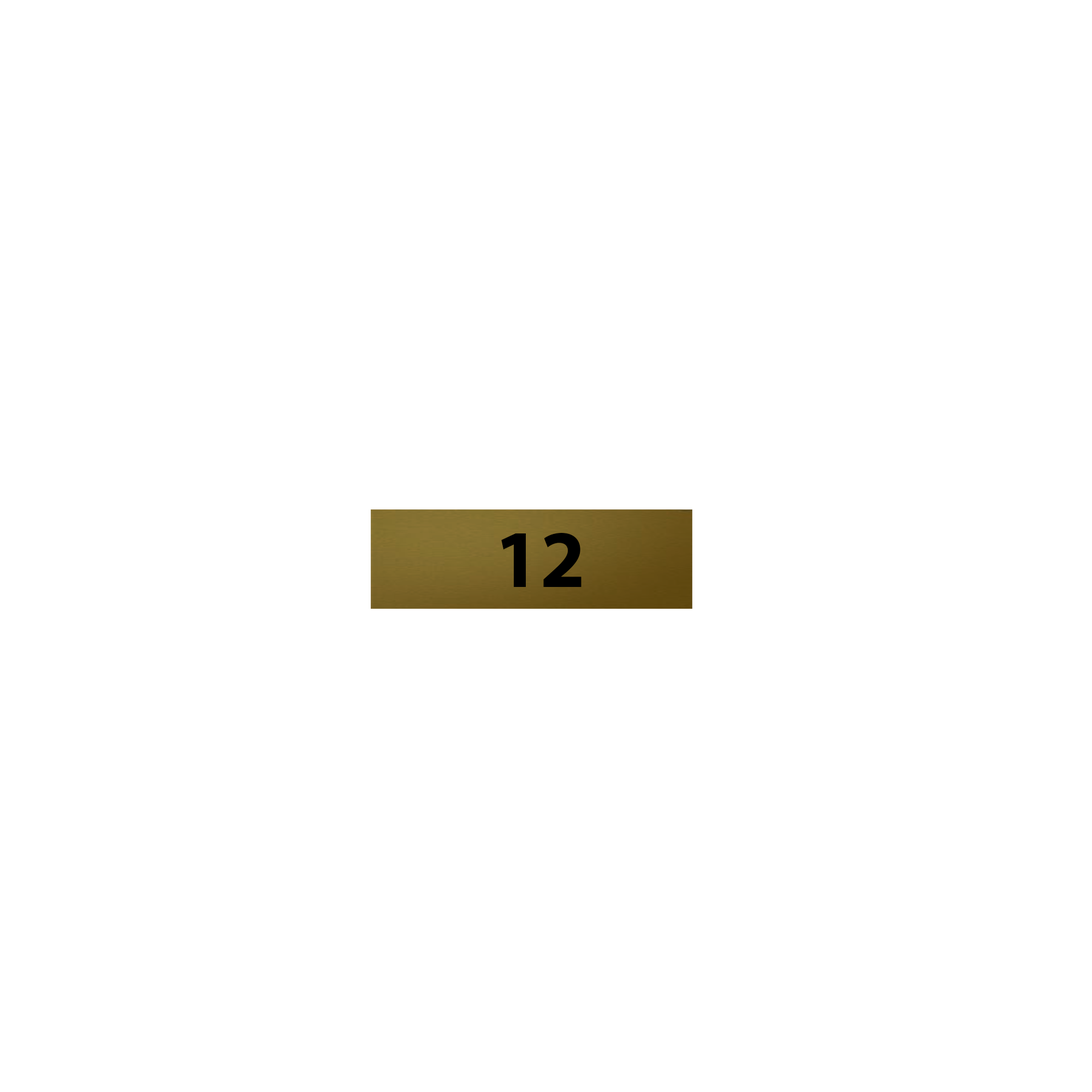
<style>
.page{position:relative;width:1092px;height:1092px;background:#ffffff}
.page>*{position:absolute;margin:0}
.t1{font:81.9px "MyriadPro-Bold";color:#000000}
</style>
<div class="page">
<p class="t1" style="left:501px;top:533px;width:80px;height:54px">12</p>
</div>
